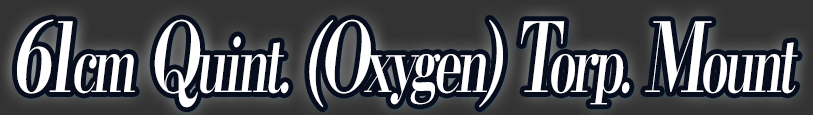
<style>
.page{position:relative;width:813px;height:115px;background:#070d1d}
.page>*{position:absolute;margin:0}
.t1{font:76.8px "KochoStd-Heavy";letter-spacing:-0.08em;color:#ffffff;font-style:italic;scale:0.67 1}
.t2{font:96px "KochoStd-Heavy";letter-spacing:-0.08em;color:#ffffff;font-style:italic;scale:0.67 1}
</style>
<div class="page">
<p class="t1" style="left:17px;top:19px;width:781px;height:89px"><span class="t2">61</span>cm<span class="t2"> Q</span>uint.<span class="t2"> (O</span>xygen<span class="t2">) T</span>orp.<span class="t2"> M</span>ount</p>
</div>
